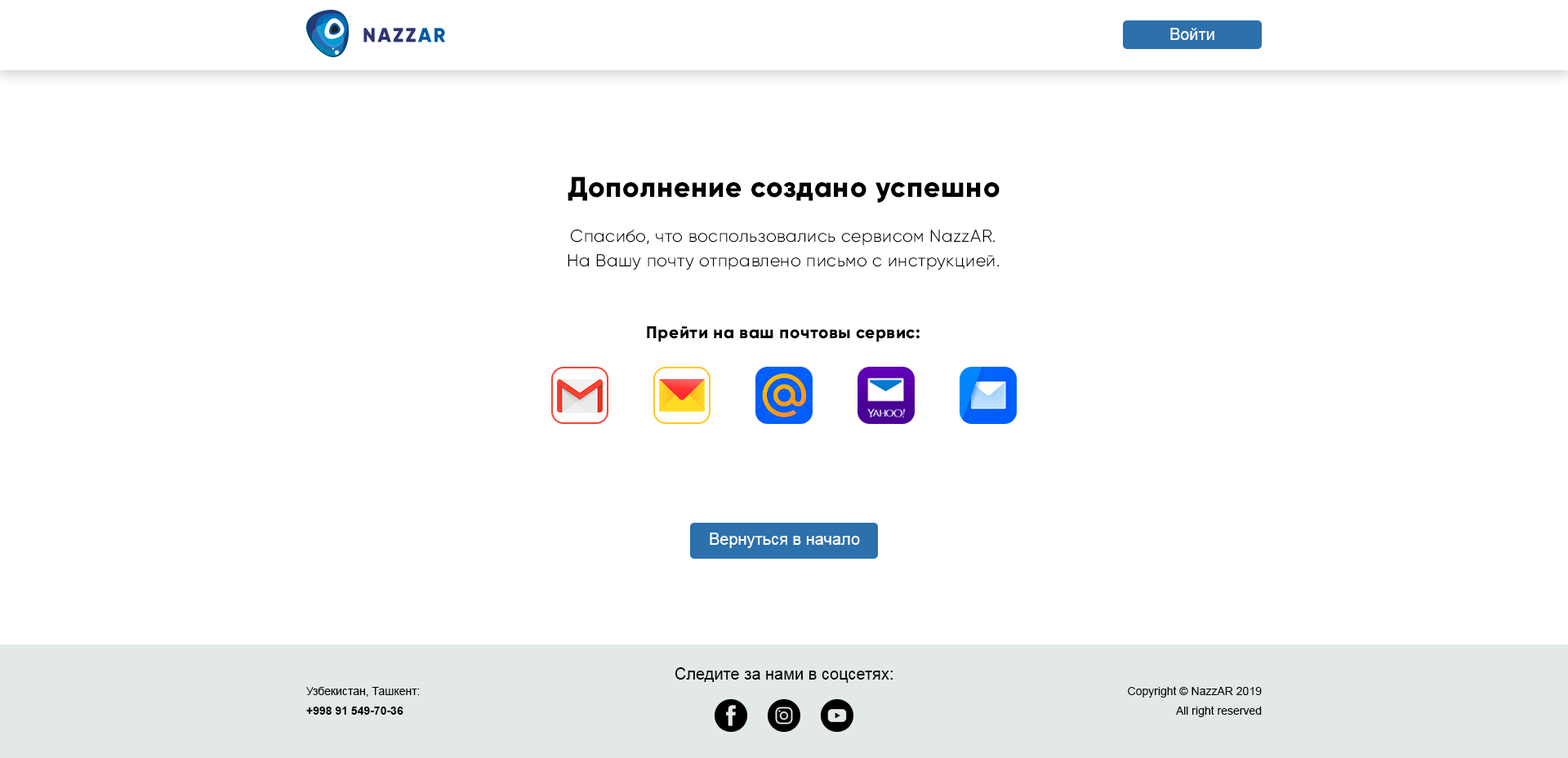
<style>
.page{position:relative;width:1568px;height:758px;background:#ffffff}
.page>*{position:absolute;margin:0}
.t1{font:16.3px "ArialMT";color:#ffffff}
.t2{font:28.6px "Gilroy-ExtraBold";letter-spacing:0.025em;color:#000000}
.t3{font:17.1px/24.5px "Gilroy-Light";letter-spacing:0.025em;color:#000000}
.t4{font:17.1px "Gilroy-ExtraBold";letter-spacing:0.025em;color:#000000}
.t5{font:16.3px "ArialMT";color:#010101}
.t6{font:11.4px/19.6px "ArialMT";color:#010101}
.t7{font:11.4px/19.6px "Arial-BoldMT";color:#010101}
</style>
<div class="page">
<p class="t1" style="left:1170px;top:28px;width:44px;height:12px">Войти</p>
<p class="t2" style="left:568px;top:176px;width:432px;height:27px">Дополнение создано успешно</p>
<p class="t3" style="left:568px;top:229px;width:432px;height:41px;text-align:center">Спасибо, что воспользовались сервисом NazzAR.<br>На Вашу почту отправлено письмо с инструкцией.</p>
<p class="t4" style="left:647px;top:326px;width:273px;height:16px">Прейти на ваш почтовы сервис:</p>
<p class="t1" style="left:710px;top:532px;width:150px;height:16px">Вернуться в начало</p>
<p class="t5" style="left:675px;top:667px;width:218px;height:16px">Следите за нами в соцсетях:</p>
<p class="t6" style="left:306px;top:687px;width:114px;height:28px">Узбекистан, Ташкент: <br><span class="t7">+998 91 549-70-36</span></p>
<p class="t6" style="left:1128px;top:686px;width:134px;height:31px;text-align:right">Copyright © NazzAR 2019<br>All right reserved</p>
</div>
